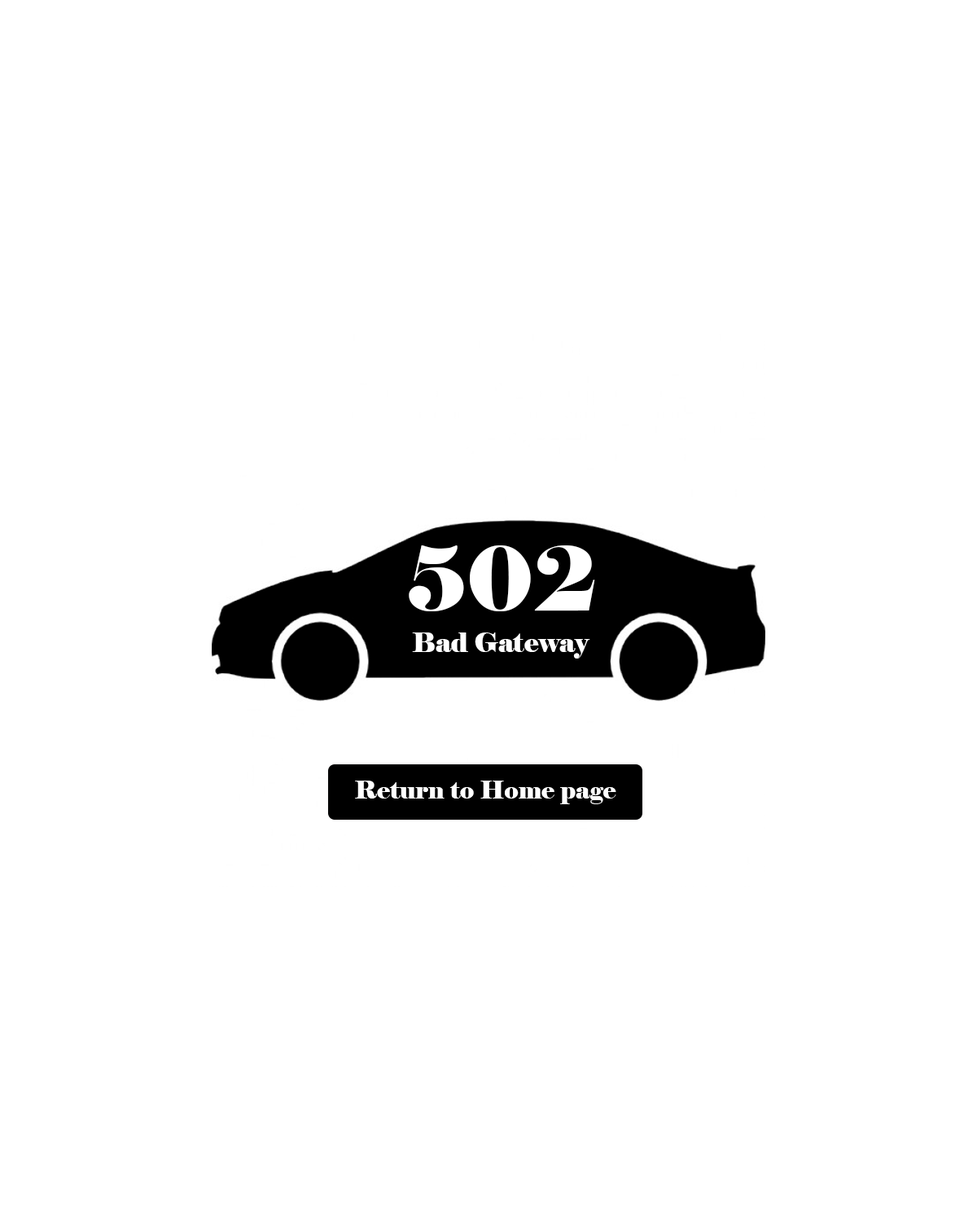
<style>
.page{position:relative;width:977px;height:1221px;background:#ffffff}
.page>*{position:absolute;margin:0}
.t1{font:88.4px "Elephant-Regular";color:#ffffff}
.t2{font:26.5px "Elephant-Regular";color:#ffffff}
.t3{font:24.4px "Elephant-Regular";color:#ffffff}
</style>
<div class="page">
<p class="t1" style="left:409px;top:545px;width:186px;height:66px">502</p>
<p class="t2" style="left:412px;top:632px;width:178px;height:26px">Bad Gateway</p>
<p class="t3" style="left:355px;top:781px;width:261px;height:23px">Return to Home page</p>
<p class="t3" style="left:355px;top:781px;width:261px;height:23px">Return to Home page</p>
</div>
